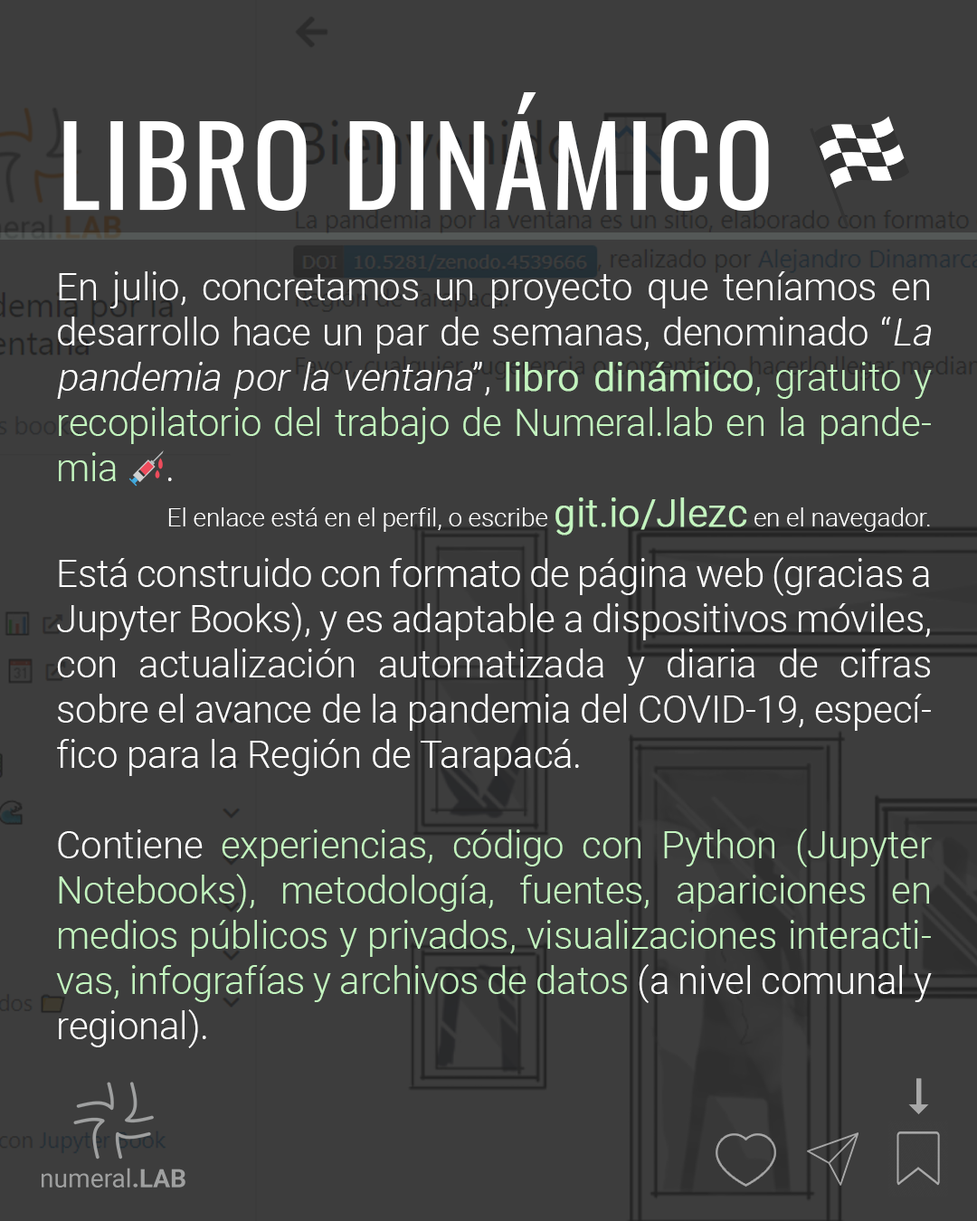
<style>
.page{position:relative;width:977px;height:1221px;background:#3d3d3d}
.page>*{position:absolute;margin:0}
.t1{font:109.7px "Oswald-Regular";letter-spacing:0.025em;color:#ffffff}
.t2{font:109.7px "EmojiOneColor";letter-spacing:0.025em;color:#ffffff}
.t3{font:37.7px "Roboto-Light";color:#ffffff}
.t4{font:37.7px "Roboto-Light";color:#ffffff;font-style:italic}
.t5{font:37.7px "Roboto-Light";color:#c3f4bf;font-weight:bold}
.t6{font:37.7px "Roboto-Light";color:#c3f4bf}
.t7{font:37.7px "EmojiOneColor";color:#c3f4bf}
.t8{font:25.1px "Roboto-Light";color:#ffffff}
.t9{font:51.6px "Arrows";letter-spacing:0.05em;color:#a8a8a8}
</style>
<div class="page">
<p class="t1" style="left:63px;top:92px;width:847px;height:135px">LIBRO DINÁMICO <span class="t2">🏁</span></p>
<p class="t3" style="left:56px;top:271px;width:875px;height:777px;text-align:justify">En julio, concretamos un proyecto que teníamos en desarrollo hace un par de semanas, denominado “<span class="t4">La pandemia por la ventana</span>”, <span class="t5">libro dinámico</span><span class="t6">, gratuito y recopilatorio del trabajo de Numeral.lab en la pandemia </span><span class="t7">💉</span>.<br><span class="t8">El enlace está en el perfil, o escribe </span><span class="t5">git.io/Jlezc</span><span class="t8"> en el navegador.<br><br></span>Está construido con formato de página web (gracias a Jupyter Books), y es adaptable a dispositivos móviles, con actualización automatizada y diaria de cifras sobre el avance de la pandemia del COVID-19, específico para la Región de Tarapacá.<br><br>Contiene <span class="t6">experiencias, código con Python (Jupyter Notebooks), metodología, fuentes, apariciones en medios públicos y privados, visualizaciones interactivas, infografías y archivos de datos</span> (a nivel comunal y regional).</p>
<p class="t9" style="left:908px;top:1078px;width:21px;height:36px;rotate:90deg">A</p>
<p class="t9" style="left:908px;top:1078px;width:21px;height:36px;rotate:90deg">A</p>
</div>
